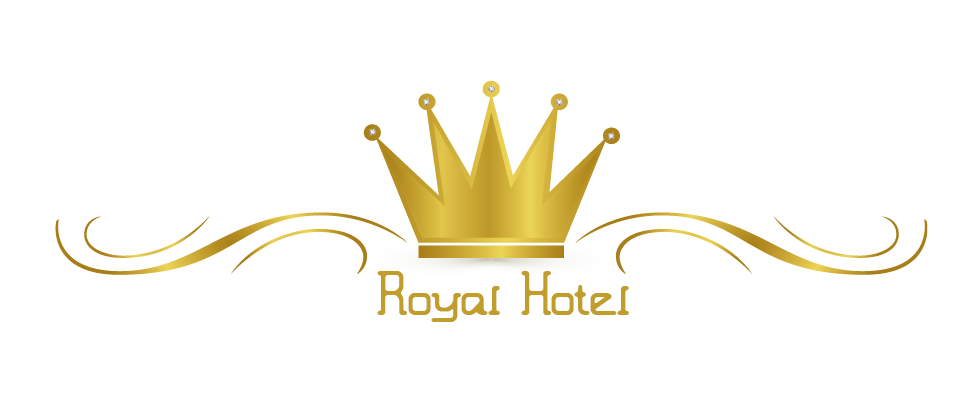
<style>
.page{position:relative;width:976px;height:395px;background:#ffffff}
.page>*{position:absolute;margin:0}
.t1{font:12px "MoronicMisfireBRK";color:#c19e2c}
</style>
<div class="page">
<p class="t1" style="left:377px;top:271px;width:252px;height:51px">Royal Hotel</p>
</div>
